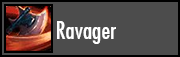
<style>
.page{position:relative;width:180px;height:57px;background:#4c4c4c}
.page>*{position:absolute;margin:0}
.t1{font:24px "FuturaCondensed";color:#ffffff}
</style>
<div class="page">
<p class="t1" style="left:57px;top:21px;width:59px;height:23px">Ravager</p>
</div>
